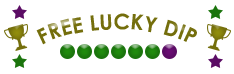
<style>
.page{position:relative;width:234px;height:74px;background:#ffffff}
.page>*{position:absolute;margin:0}
.t1{font:21.3px "CenturyGothic-Bold";color:#746e0c}
</style>
<div class="page">
<p class="t1" style="left:36px;top:13px;width:161px;height:32px;rotate:180deg">FREE LUCKY DIP</p>
</div>
